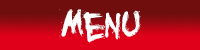
<style>
.page{position:relative;width:200px;height:50px;background:#e10019}
.page>*{position:absolute;margin:0}
.t1{font:55.4px "YouMurdererBB";color:#fbfbfb}
</style>
<div class="page">
<p class="t1" style="left:59px;top:9px;width:82px;height:34px">Menu</p>
</div>
